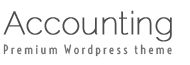
<style>
.page{position:relative;width:190px;height:65px;background:#ffffff}
.page>*{position:absolute;margin:0}
.t1{font:12px "Voltaire";letter-spacing:0.19em;color:#6e6e6e}
</style>
<div class="page">
<p class="t1" style="left:3px;top:44px;width:169px;height:13px">Premium Wordpress theme</p>
</div>
